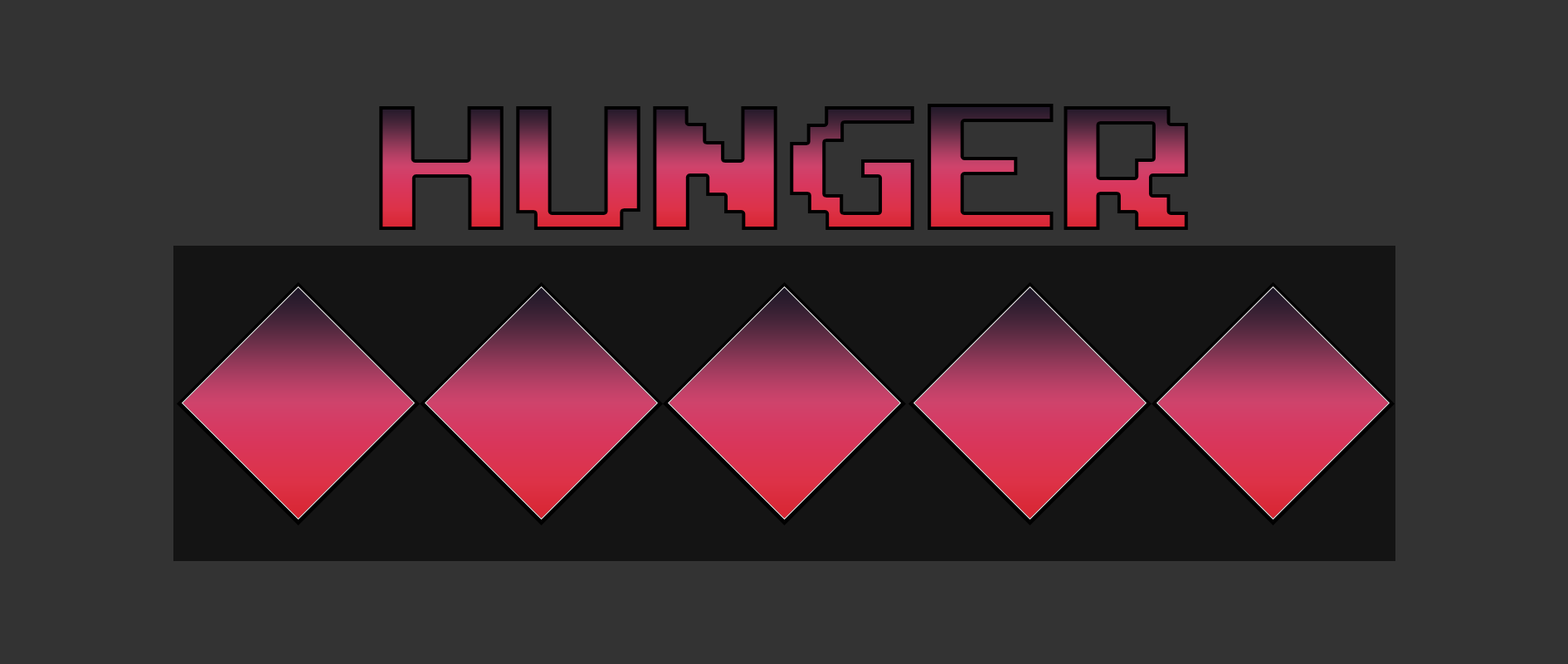
<style>
.page{position:relative;width:1568px;height:664px;background:#333333}
.page>*{position:absolute;margin:0}
.t1{font:248.9px "ArcadeClassic"}
</style>
<div class="page">
<p class="t1" style="left:379px;top:104px;width:809px;height:126px">HUNGER</p>
</div>
